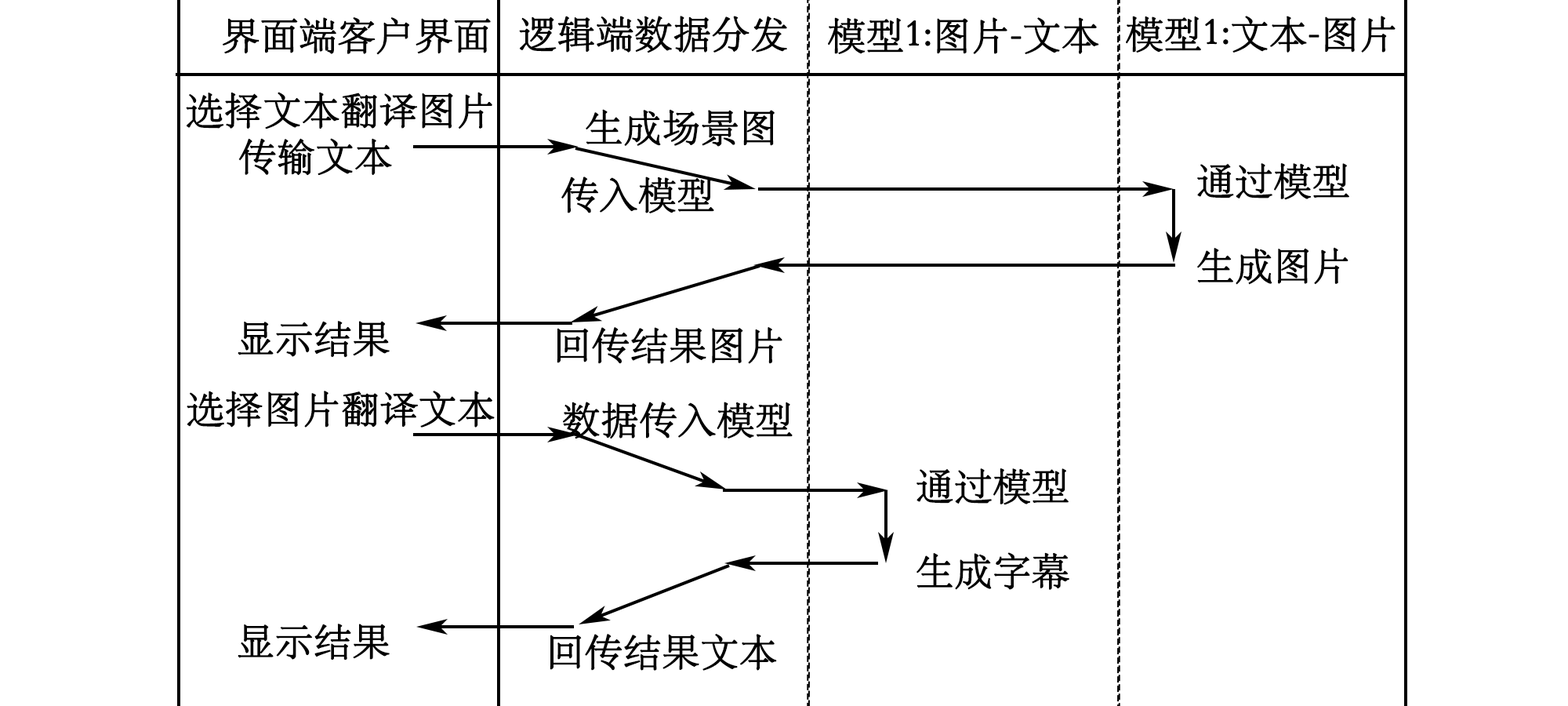
<style>
.page{position:relative;width:1568px;height:706px;background:#ffffff}
.page>*{position:absolute;margin:0}
.t1{font:37.6px "STSong";color:#000000;font-weight:bold}
.t2{font:37.6px/84.7px "STSong";color:#000000;font-weight:bold}
</style>
<div class="page">
<p class="t1" style="left:223px;top:17px;width:268px;height:38px">界面端客户界面</p>
<p class="t1" style="left:519px;top:16px;width:268px;height:37px">逻辑端数据分发</p>
<p class="t1" style="left:828px;top:17px;width:271px;height:37px">模型1:图片-文本</p>
<p class="t1" style="left:1126px;top:16px;width:270px;height:37px">模型1:文本-图片</p>
<p class="t1" style="left:186px;top:92px;width:306px;height:37px">选择文本翻译图片</p>
<p class="t1" style="left:586px;top:109px;width:189px;height:38px">生成场景图</p>
<p class="t1" style="left:238px;top:138px;width:154px;height:38px">传输文本</p>
<p class="t2" style="left:1197px;top:163px;width:152px;height:122px">通过模型<br>生成图片</p>
<p class="t1" style="left:561px;top:176px;width:153px;height:37px">传入模型</p>
<p class="t1" style="left:238px;top:321px;width:152px;height:37px">显示结果</p>
<p class="t1" style="left:557px;top:327px;width:225px;height:37px">回传结果图片</p>
<p class="t1" style="left:187px;top:390px;width:308px;height:37px">选择图片翻译文本</p>
<p class="t1" style="left:563px;top:401px;width:230px;height:38px">数据传入模型</p>
<p class="t2" style="left:916px;top:468px;width:153px;height:122px">通过模型<br>生成字幕</p>
<p class="t1" style="left:238px;top:623px;width:152px;height:37px">显示结果</p>
<p class="t1" style="left:550px;top:633px;width:227px;height:37px">回传结果文本</p>
</div>
